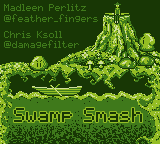
<style>
.page{position:relative;width:160px;height:144px;background:#183705}
.page>*{position:absolute;margin:0}
.t1{font:8px/10.7px "pixelmix";color:#3f791b}
.t2{font:13.3px/570px "Geo-Regular";color:#3f791b;font-weight:bold}
.t3{font:16px "pixelmix";color:#183705}
</style>
<div class="page">
<p class="t1" style="left:4px;top:4px;width:94px;height:44px">Madleen Perlitz<br>@feather_fingers<br><br>Chris Ksoll<br>@damagefilter<br><span class="t2">@</span></p>
<p class="t3" style="left:14px;top:108px;width:128px;height:14px">Swamp Smash</p>
</div>
